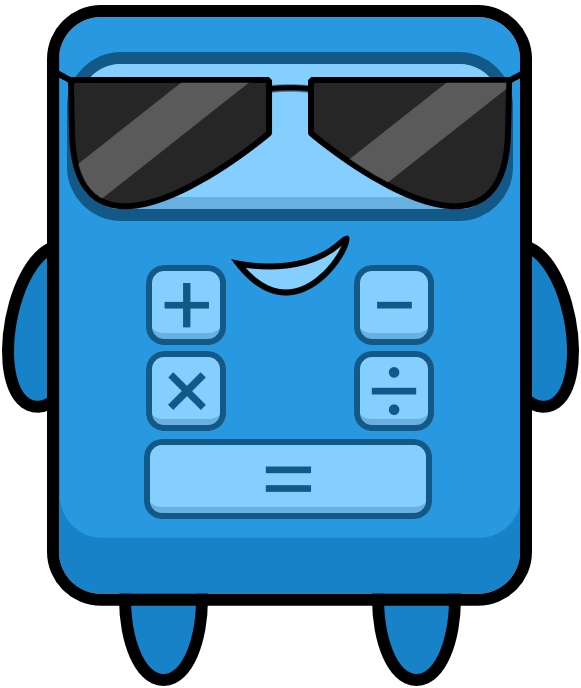
<style>
.page{position:relative;width:581px;height:688px;background:#2899e1}
.page>*{position:absolute;margin:0}
.t1{font:87px "Poppins-Regular";color:#135987}
</style>
<div class="page">
<p class="t1" style="left:164px;top:282px;width:45px;height:46px">+</p>
<p class="t1" style="left:377px;top:301px;width:35px;height:8px">-</p>
<p class="t1" style="left:371px;top:366px;width:46px;height:50px">÷</p>
<p class="t1" style="left:167px;top:372px;width:39px;height:38px">×</p>
<p class="t1" style="left:265px;top:466px;width:47px;height:26px">=</p>
</div>
